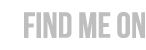
<style>
.page{position:relative;width:146px;height:50px;background:#ffffff}
.page>*{position:absolute;margin:0}
.t1{font:36px "BebasNeue";letter-spacing:-0.025em;color:#bebebe;font-weight:bold}
</style>
<div class="page">
<p class="t1" style="left:24px;top:12px;width:121px;height:26px">Find me on</p>
</div>
